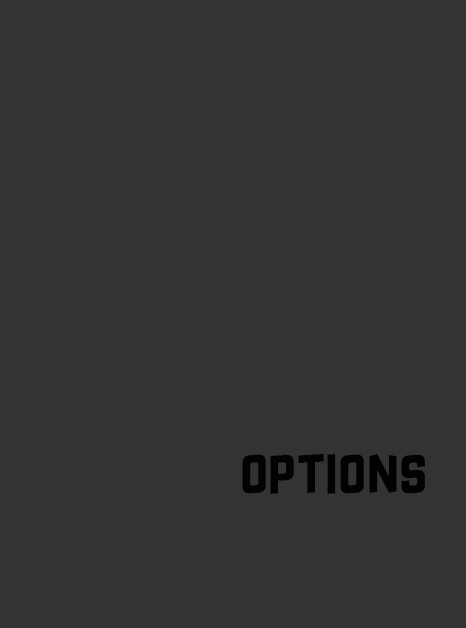
<style>
.page{position:relative;width:466px;height:628px;background:#333333}
.page>*{position:absolute;margin:0}
.t1{font:52.1px "CrazySixties";color:#020202}
</style>
<div class="page">
<p class="t1" style="left:242px;top:454px;width:183px;height:40px">OPTIONS</p>
</div>
